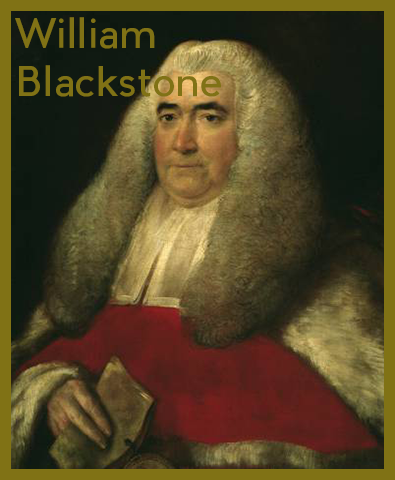
<style>
.page{position:relative;width:395px;height:480px}
.page>*{position:absolute;margin:0}
.t1{font:40px "PierSans";color:#807215}
</style>
<div class="page">
<p class="t1" style="left:15px;top:17px;width:206px;height:80px">William<br>Blackstone</p>
</div>
